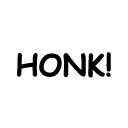
<style>
.page{position:relative;width:128px;height:128px;background:#ffffff}
.page>*{position:absolute;margin:0}
.t1{font:30px "ComicSansMS-Bold";color:#000000}
</style>
<div class="page">
<p class="t1" style="left:17px;top:52px;width:94px;height:26px">HONK!</p>
</div>
